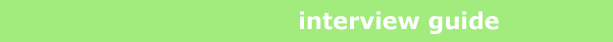
<style>
.page{position:relative;width:613px;height:42px;background:#a1ec7c}
.page>*{position:absolute;margin:0}
.t1{font:23px "Verdana-Bold";color:#ffffff}
</style>
<div class="page">
<p class="t1" style="left:300px;top:11px;width:199px;height:23px">interview guide</p>
</div>
